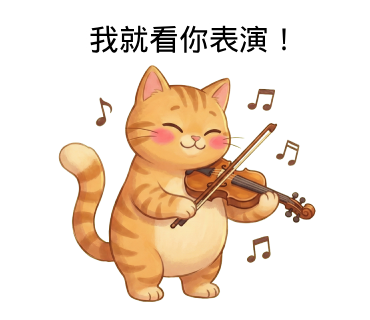
<style>
.page{position:relative;width:370px;height:320px;background:#ffffff}
.page>*{position:absolute;margin:0}
.t1{font:30px "DroidSansFallback";color:#000000}
</style>
<div class="page">
<p class="t1" style="left:90px;top:25px;width:196px;height:28px">我就看你表演！</p>
</div>
